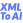
<style>
.page{position:relative;width:23px;height:23px;background:#ffffff}
.page>*{position:absolute;margin:0}
.t1{font:10px/9px "Lato-BlackItalic";letter-spacing:-0.025em;color:#5976f4;font-weight:bold}
</style>
<div class="page">
<p class="t1" style="left:0px;top:3px;width:22px;height:17px;text-align:center">XML<br>To AI</p>
</div>
